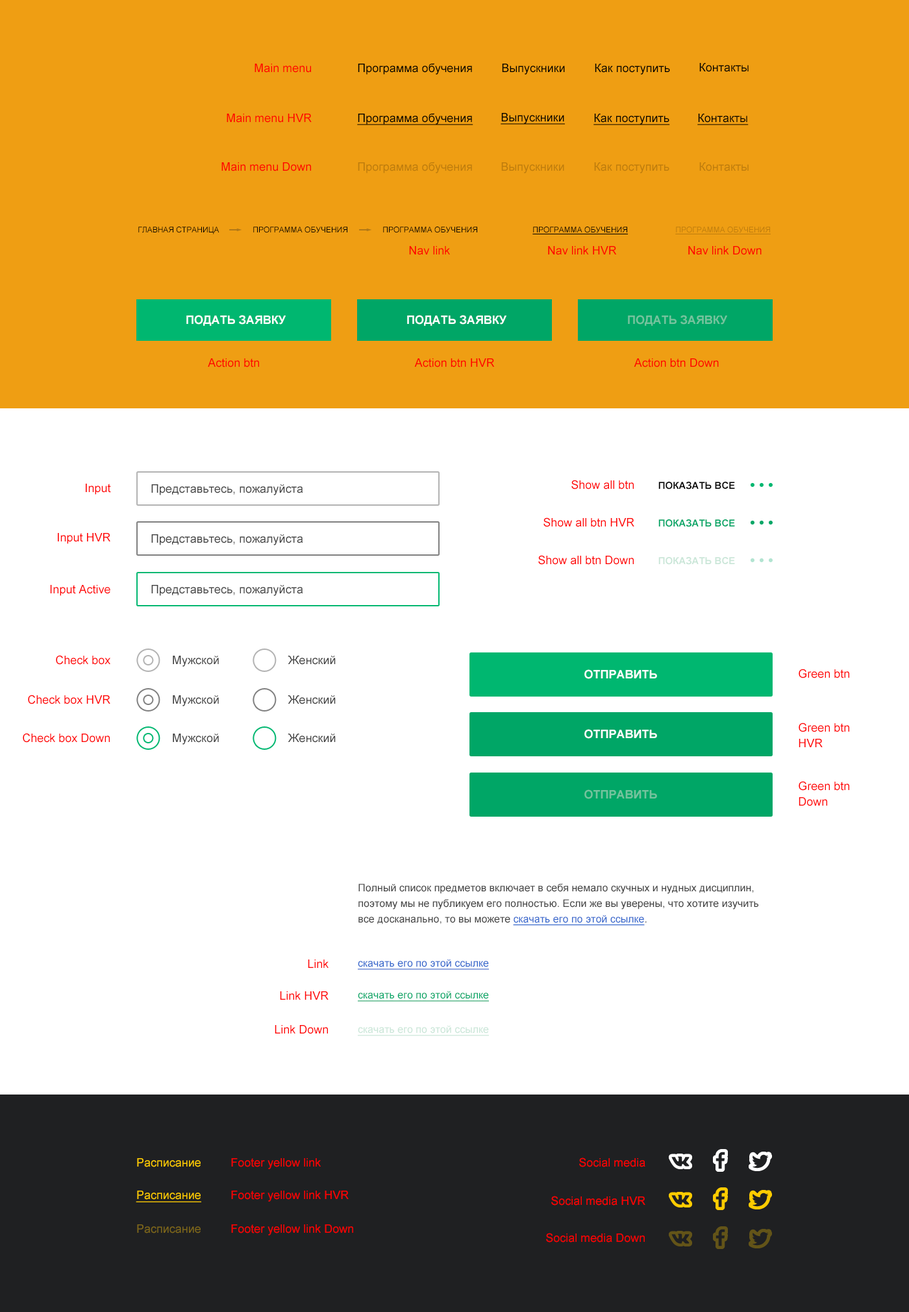
<style>
.page{position:relative;width:909px;height:1312px;background:#ffffff}
.page>*{position:absolute;margin:0}
.t1{font:11.7px "ArialMT";color:#ff0000}
.t2{font:11.7px "ArialMT";color:#000000}
.t3{font:11.7px "ArialMT";color:#000000;text-decoration:underline}
.t4{font:11.7px "ArialMT";color:#be7c0d}
.t5{font:7.8px "ArialMT";color:#000000;text-transform:uppercase}
.t6{font:7.8px "ArialMT";color:#000000;text-transform:uppercase;text-decoration:underline}
.t7{font:7.8px "ArialMT";color:#be7c0d;text-transform:uppercase;text-decoration:underline}
.t8{font:11.7px "Arial-BoldMT";color:#ffffff;text-transform:uppercase}
.t9{font:11.7px "Arial-BoldMT";color:#74c39e;text-transform:uppercase}
.t10{font:11.7px "ArialMT";color:#404040}
.t11{font:9.7px "Arial-BoldMT";color:#000000}
.t12{font:9.7px "Arial-BoldMT";color:#00a666}
.t13{font:9.7px "Arial-BoldMT";color:#cae6d8}
.t14{font:11.7px/15.6px "ArialMT";color:#ff0000}
.t15{font:10.4px/15.6px "ArialMT";color:#404040}
.t16{font:10.4px/15.6px "ArialMT";color:#3366cc;text-decoration:underline}
.t17{font:10.4px "ArialMT";color:#3366cc;text-decoration:underline}
.t18{font:10.4px "ArialMT";color:#00a666;text-decoration:underline}
.t19{font:10.4px "ArialMT";color:#cae6d8;text-decoration:underline}
.t20{font:11.7px "ArialMT";color:#ffcc00}
.t21{font:11.7px "ArialMT";color:#ffcc00;text-decoration:underline}
.t22{font:11.7px "ArialMT";color:#7e6719}
</style>
<div class="page">
<p class="t1" style="left:254px;top:64px;width:57px;height:9px">Main menu</p>
<p class="t2" style="left:358px;top:63px;width:114px;height:12px">Программа обучения</p>
<p class="t2" style="left:502px;top:64px;width:63px;height:11px">Выпускники</p>
<p class="t2" style="left:595px;top:64px;width:75px;height:11px">Как поступить</p>
<p class="t2" style="left:699px;top:63px;width:50px;height:9px">Контакты</p>
<p class="t1" style="left:227px;top:114px;width:85px;height:9px">Main menu HVR</p>
<p class="t3" style="left:357px;top:113px;width:116px;height:12px">Программа обучения</p>
<p class="t3" style="left:501px;top:113px;width:64px;height:12px">Выпускники</p>
<p class="t3" style="left:593px;top:114px;width:77px;height:11px">Как поступить</p>
<p class="t3" style="left:697px;top:114px;width:52px;height:11px">Контакты</p>
<p class="t4" style="left:358px;top:162px;width:114px;height:11px">Программа обучения</p>
<p class="t1" style="left:221px;top:162px;width:90px;height:9px">Main menu Down</p>
<p class="t4" style="left:501px;top:162px;width:63px;height:11px">Выпускники</p>
<p class="t4" style="left:594px;top:162px;width:75px;height:11px">Как поступить</p>
<p class="t4" style="left:699px;top:162px;width:50px;height:9px">Контакты</p>
<p class="t5" style="left:138px;top:227px;width:81px;height:7px">Главная страница</p>
<p class="t5" style="left:253px;top:227px;width:94px;height:6px">Программа обучения</p>
<p class="t5" style="left:383px;top:227px;width:94px;height:6px">Программа обучения</p>
<p class="t6" style="left:532px;top:227px;width:96px;height:7px">Программа обучения</p>
<p class="t7" style="left:675px;top:227px;width:96px;height:7px">Программа обучения</p>
<p class="t1" style="left:409px;top:246px;width:41px;height:9px">Nav link</p>
<p class="t1" style="left:548px;top:246px;width:69px;height:9px">Nav link HVR</p>
<p class="t1" style="left:688px;top:246px;width:73px;height:9px">Nav link Down</p>
<p class="t8" style="left:186px;top:315px;width:100px;height:11px">Подать заявку</p>
<p class="t8" style="left:407px;top:315px;width:99px;height:11px">Подать заявку</p>
<p class="t9" style="left:628px;top:315px;width:99px;height:11px">Подать заявку</p>
<p class="t1" style="left:208px;top:358px;width:51px;height:9px">Action btn</p>
<p class="t1" style="left:414px;top:358px;width:81px;height:9px">Action btn HVR</p>
<p class="t1" style="left:634px;top:358px;width:85px;height:9px">Action btn Down</p>
<p class="t1" style="left:86px;top:484px;width:25px;height:11px">Input</p>
<p class="t10" style="left:151px;top:484px;width:152px;height:11px">Представьтесь, пожалуйста</p>
<p class="t1" style="left:571px;top:480px;width:63px;height:9px">Show all btn</p>
<p class="t11" style="left:658px;top:482px;width:77px;height:7px">ПОКАЗАТЬ ВСЕ</p>
<p class="t1" style="left:543px;top:517px;width:91px;height:10px">Show all btn HVR</p>
<p class="t12" style="left:658px;top:519px;width:77px;height:8px">ПОКАЗАТЬ ВСЕ</p>
<p class="t1" style="left:58px;top:533px;width:52px;height:11px">Input HVR</p>
<p class="t10" style="left:151px;top:534px;width:152px;height:11px">Представьтесь, пожалуйста</p>
<p class="t1" style="left:538px;top:555px;width:96px;height:10px">Show all btn Down</p>
<p class="t13" style="left:658px;top:557px;width:77px;height:8px">ПОКАЗАТЬ ВСЕ</p>
<p class="t1" style="left:50px;top:585px;width:60px;height:11px">Input Active</p>
<p class="t10" style="left:151px;top:585px;width:152px;height:11px">Представьтесь, пожалуйста</p>
<p class="t1" style="left:56px;top:655px;width:54px;height:10px">Check box</p>
<p class="t10" style="left:173px;top:656px;width:46px;height:11px">Мужской</p>
<p class="t10" style="left:288px;top:656px;width:48px;height:9px">Женский</p>
<p class="t8" style="left:584px;top:669px;width:73px;height:10px">Отправить</p>
<p class="t1" style="left:798px;top:669px;width:51px;height:9px">Green btn</p>
<p class="t1" style="left:28px;top:695px;width:82px;height:9px">Check box HVR</p>
<p class="t10" style="left:173px;top:695px;width:46px;height:11px">Мужской</p>
<p class="t10" style="left:288px;top:695px;width:48px;height:9px">Женский</p>
<p class="t14" style="left:798px;top:723px;width:51px;height:24px">Green btn<br>HVR</p>
<p class="t1" style="left:23px;top:733px;width:87px;height:10px">Check box Down</p>
<p class="t10" style="left:173px;top:734px;width:46px;height:11px">Мужской</p>
<p class="t10" style="left:288px;top:734px;width:48px;height:9px">Женский</p>
<p class="t8" style="left:584px;top:729px;width:73px;height:10px">Отправить</p>
<p class="t14" style="left:798px;top:781px;width:51px;height:25px">Green btn<br>Down</p>
<p class="t9" style="left:584px;top:789px;width:73px;height:10px">Отправить</p>
<p class="t15" style="left:358px;top:884px;width:400px;height:42px">Полный список предметов включает в себя немало скучных и нудных дисциплин, поэтому мы не публикуем его полностью. Если же вы уверены, что хотите изучить все досканально, то вы можете <span class="t16">скачать его по этой ссылке</span>.</p>
<p class="t1" style="left:308px;top:959px;width:20px;height:9px">Link</p>
<p class="t17" style="left:358px;top:959px;width:131px;height:11px">скачать его по этой ссылке</p>
<p class="t1" style="left:280px;top:991px;width:48px;height:9px">Link HVR</p>
<p class="t18" style="left:358px;top:991px;width:131px;height:11px">скачать его по этой ссылке</p>
<p class="t1" style="left:275px;top:1025px;width:53px;height:9px">Link Down</p>
<p class="t19" style="left:358px;top:1025px;width:131px;height:11px">скачать его по этой ссылке</p>
<p class="t1" style="left:579px;top:1158px;width:66px;height:9px">Social media</p>
<p class="t20" style="left:137px;top:1158px;width:64px;height:9px">Расписание</p>
<p class="t1" style="left:231px;top:1158px;width:90px;height:11px">Footer yellow link</p>
<p class="t21" style="left:136px;top:1191px;width:65px;height:11px">Расписание</p>
<p class="t1" style="left:231px;top:1191px;width:118px;height:11px">Footer yellow link HVR</p>
<p class="t1" style="left:551px;top:1196px;width:94px;height:10px">Social media HVR</p>
<p class="t22" style="left:137px;top:1224px;width:64px;height:9px">Расписание</p>
<p class="t1" style="left:231px;top:1224px;width:122px;height:11px">Footer yellow link Down</p>
<p class="t1" style="left:546px;top:1233px;width:99px;height:10px">Social media Down</p>
</div>
